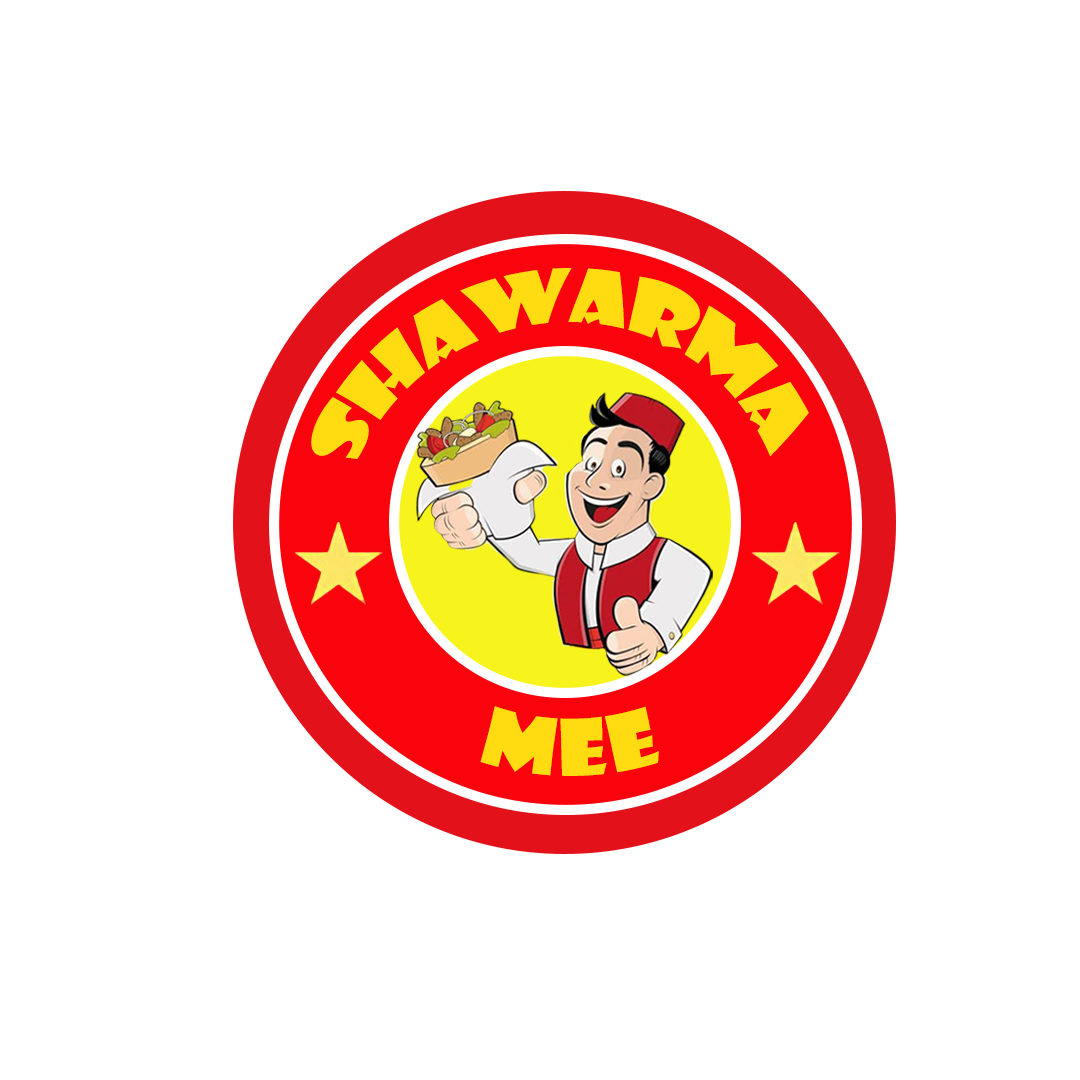
<style>
.page{position:relative;width:1080px;height:1080px;background:#ffffff}
.page>*{position:absolute;margin:0}
.t1{font:71.3px "ShowcardGothic-Reg";color:#ffdb11}
.t2{font:76px "ShowcardGothic-Reg";color:#ffdb11}
</style>
<div class="page">
<p class="t1" style="left:311px;top:268px;width:498px;height:191px;rotate:-2deg">SHAWARMA</p>
<p class="t2" style="left:480px;top:706px;width:179px;height:70px">Mee</p>
</div>
